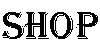
<style>
.page{position:relative;width:100px;height:50px;background:#ffffff}
.page>*{position:absolute;margin:0}
.t1{font:40.4px "Algerian";color:#000000}
</style>
<div class="page">
<p class="t1" style="left:2px;top:12px;width:96px;height:27px">SHOP</p>
</div>
